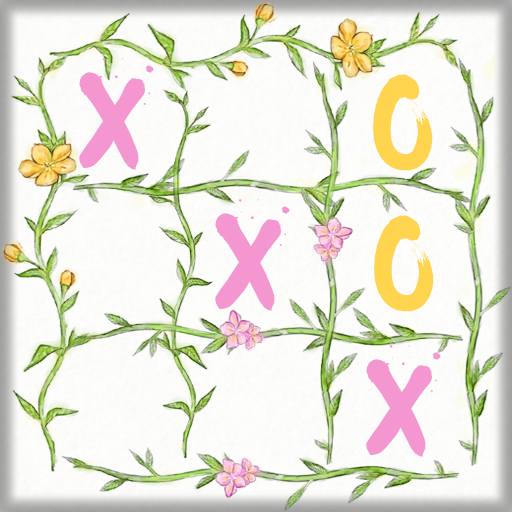
<style>
.page{position:relative;width:512px;height:512px}
.page>*{position:absolute;margin:0}
.t1{font:120px "Waterlily-Regular";color:#f497d0}
.t2{font:120px "Waterlily-Regular";color:#ffd44f}
</style>
<div class="page">
<p class="t1" style="left:79px;top:58px;width:75px;height:112px">X</p>
<p class="t2" style="left:373px;top:74px;width:60px;height:97px">O</p>
<p class="t1" style="left:215px;top:199px;width:75px;height:112px">X</p>
<p class="t2" style="left:374px;top:215px;width:60px;height:97px">O</p>
<p class="t1" style="left:366px;top:345px;width:75px;height:112px">X</p>
</div>
